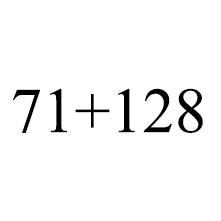
<style>
.page{position:relative;width:221px;height:221px;background:#ffffff}
.page>*{position:absolute;margin:0}
.t1{font:63.9px "TimesNewRomanPSMT";color:#000000}
</style>
<div class="page">
<p class="t1" style="left:13px;top:88px;width:190px;height:45px">71+128</p>
</div>
